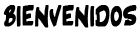
<style>
.page{position:relative;width:140px;height:30px;background:#ffffff}
.page>*{position:absolute;margin:0}
.t1{font:30px "Inkpen2Script";color:#000000;font-weight:bold}
</style>
<div class="page">
<p class="t1" style="left:3px;top:5px;width:134px;height:23px">BIENVENIDOS</p>
</div>
